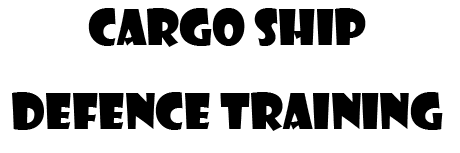
<style>
.page{position:relative;width:460px;height:153px;background:#ffffff}
.page>*{position:absolute;margin:0}
.t1{font:48px "ShowcardGothic-Reg";color:#000000}
</style>
<div class="page">
<p class="t1" style="left:12px;top:8px;width:431px;height:123px;text-align:center">Cargo Ship  <br>Defence Training</p>
</div>
